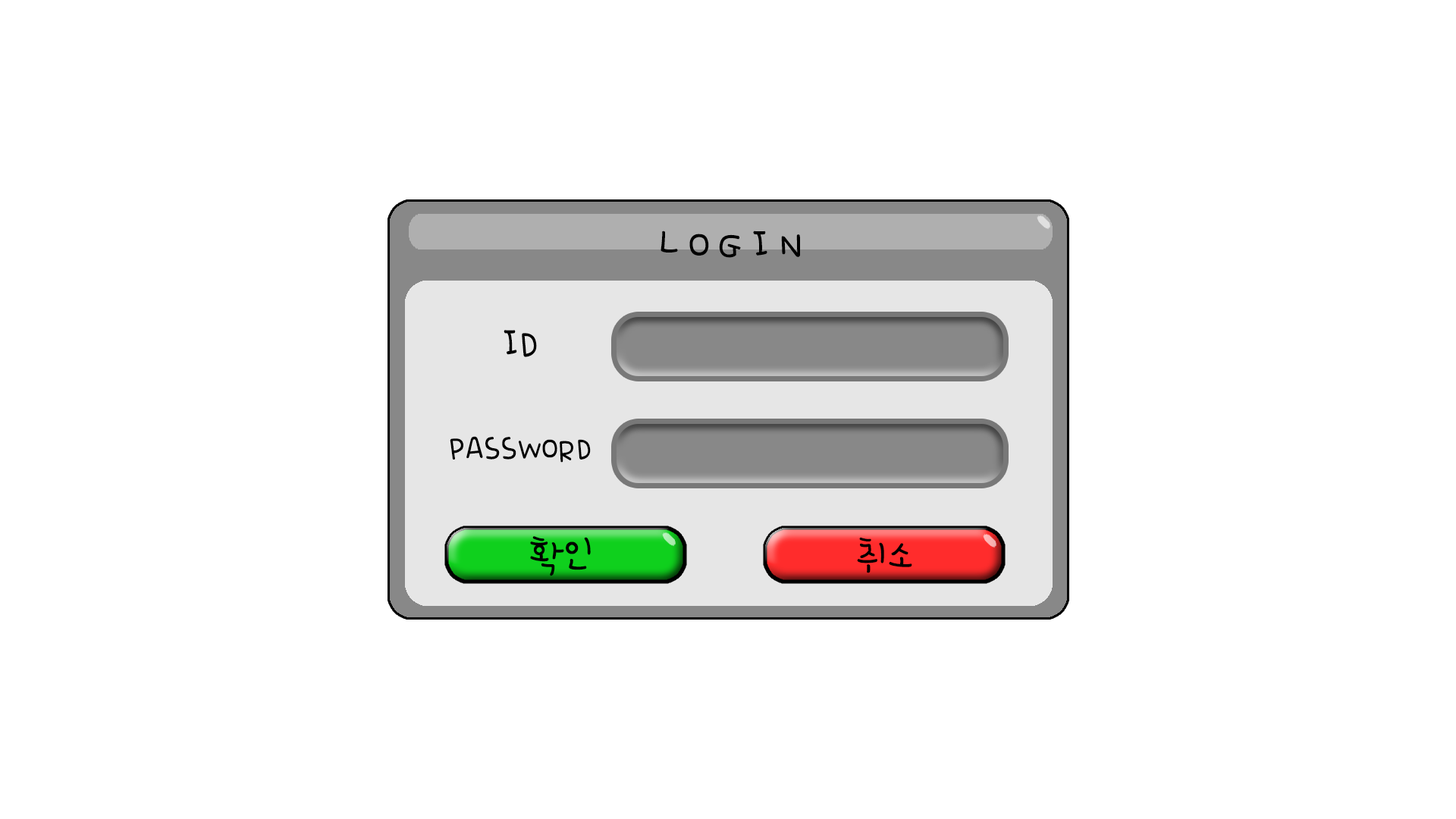
<style>
.page{position:relative;width:1456px;height:819px;background:#ffffff}
.page>*{position:absolute;margin:0}
.t1{font:45.5px "365uppercat";color:#000000}
.t2{font:45.5px "365uppercat";color:#000000;scale:0.92 1}
.t3{font:37.9px "365uppercat";color:#000000;scale:0.92 1}
</style>
<div class="page">
<p class="t1" style="left:660px;top:231px;width:140px;height:27px">LOGIN</p>
<p class="t2" style="left:504px;top:330px;width:33px;height:27px">ID</p>
<p class="t3" style="left:450px;top:436px;width:141px;height:27px">PASSWORD</p>
<p class="t1" style="left:530px;top:536px;width:61px;height:40px">확인</p>
<p class="t1" style="left:857px;top:537px;width:55px;height:36px">취소</p>
</div>
